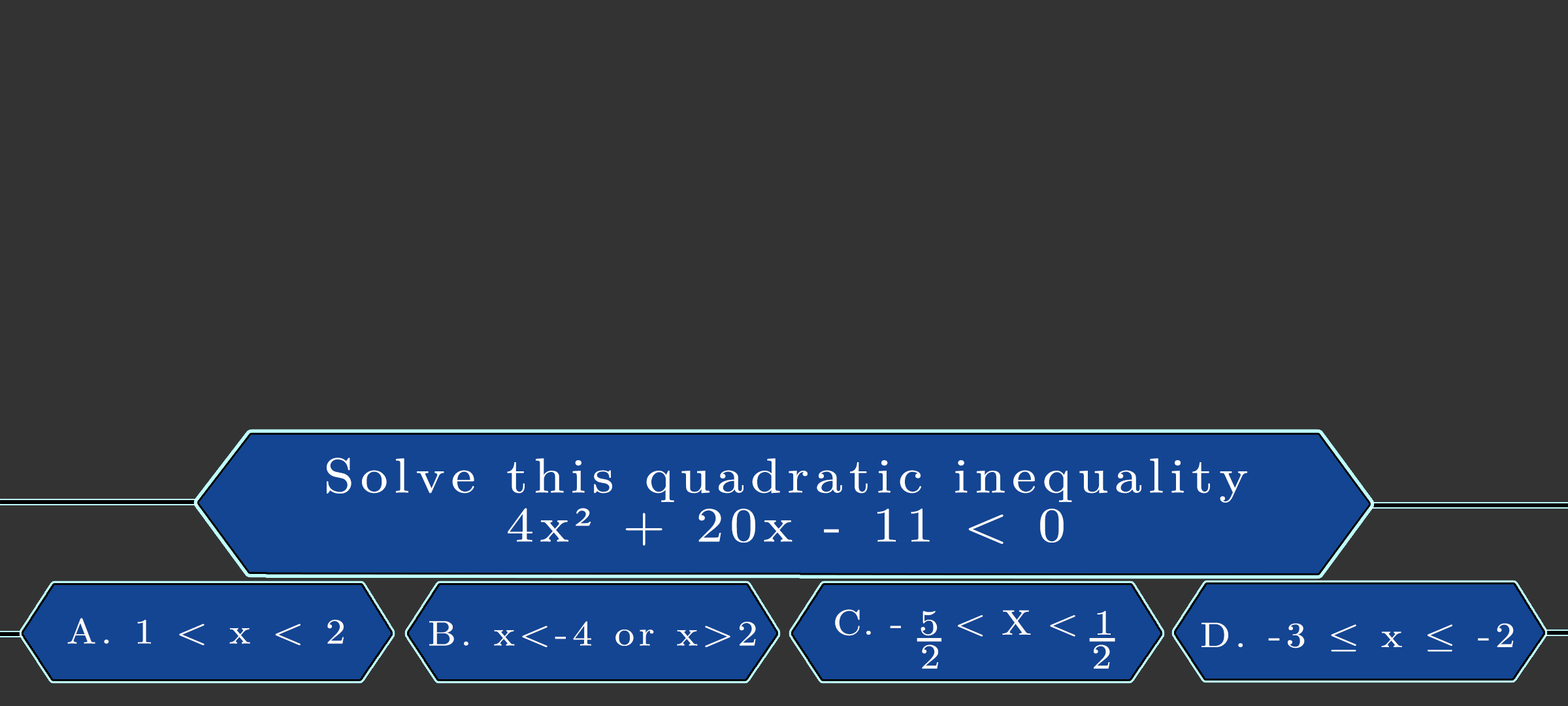
<style>
.page{position:relative;width:1568px;height:706px;background:#333333}
.page>*{position:absolute;margin:0}
.t1{font:49px/49px "LatinModernMath-Regular";letter-spacing:0.115em;color:#ffffff;scale:1.12 1}
.t2{font:49px/49px "TimesNewRomanPSMT";letter-spacing:0.115em;color:#ffffff;scale:1.12 1}
.t3{font:35.4px "LatinModernMath-Regular";letter-spacing:0.115em;color:#fdfafa;scale:1.12 1}
.t4{font:35.4px "LatinModernMath-Regular";letter-spacing:0.115em;color:#fdfafa;text-transform:uppercase;scale:1.12 1}
.t5{font:35.4px/33.9px "LatinModernMath-Regular";letter-spacing:0.035em;color:#fdfafa;text-transform:uppercase;scale:1.12 1}
.t6{font:35.4px "LatinModernMath-Regular";letter-spacing:0.115em;color:#fcfafa;scale:1.12 1}
.t7{font:35.4px "LatinModernMath-Regular";letter-spacing:0.115em;color:#fcfafa;text-transform:uppercase;scale:1.12 1}
.t8{font:30px "GillSans-UltraBoldCondensed";letter-spacing:0.115em;color:#fdfafa;text-transform:uppercase;scale:2.27 1}
.t9{font:30px "GillSans-UltraBoldCondensed";letter-spacing:0.115em;color:#fdfafa;text-transform:uppercase;scale:2.36 1}
</style>
<div class="page">
<p class="t1" style="left:327px;top:457px;width:920px;height:89px;text-align:center">Solve this quadratic inequality<br>4x<span class="t2">²</span> + 20x - 11 &lt; 0</p>
<p class="t3" style="left:67px;top:617px;width:277px;height:28px"><span class="t4">a. 1 </span>&lt; x &lt; 2</p>
<p class="t5" style="left:835px;top:609px;width:276px;height:59px">c. - 5 &lt; x &lt; 1<br>      2       2</p>
<p class="t6" style="left:429px;top:621px;width:327px;height:26px"><span class="t7">b. </span>x&lt;-4 or x&gt;2</p>
<p class="t7" style="left:1201px;top:622px;width:313px;height:29px">d. -3 ≤ <span class="t6">x </span>≤ -2</p>
<p class="t8" style="left:917px;top:638px;width:24px;height:4px">_</p>
<p class="t9" style="left:1089px;top:638px;width:26px;height:4px">_</p>
</div>
